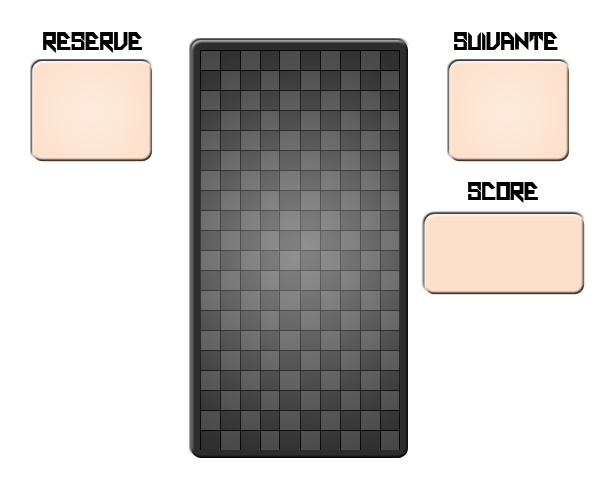
<style>
.page{position:relative;width:600px;height:500px;background:#ffffff}
.page>*{position:absolute;margin:0}
.t1{font:24px "Vador-Black";color:#000000}
</style>
<div class="page">
<p class="t1" style="left:43px;top:32px;width:99px;height:21px">RESERVE</p>
<p class="t1" style="left:454px;top:32px;width:104px;height:18px">SUIVANTE</p>
<p class="t1" style="left:468px;top:182px;width:70px;height:21px">SCORE</p>
</div>
